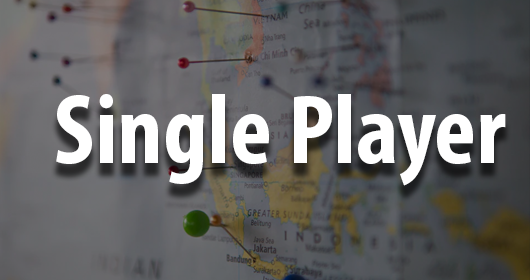
<style>
.page{position:relative;width:530px;height:280px}
.page>*{position:absolute;margin:0}
.t1{font:100px "MyriadPro-BoldCond";color:#ffffff}
</style>
<div class="page">
<p class="t1" style="left:56px;top:94px;width:450px;height:92px">Single Player</p>
</div>
